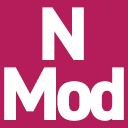
<style>
.page{position:relative;width:128px;height:128px;background:#b41c5a}
.page>*{position:absolute;margin:0}
.t1{font:76px/60px "DIN2014-ExtraBold";letter-spacing:-0.07em;color:#ffffff}
</style>
<div class="page">
<p class="t1" style="left:4px;top:7px;width:120px;height:114px;text-align:center">N<br>Mod</p>
</div>
